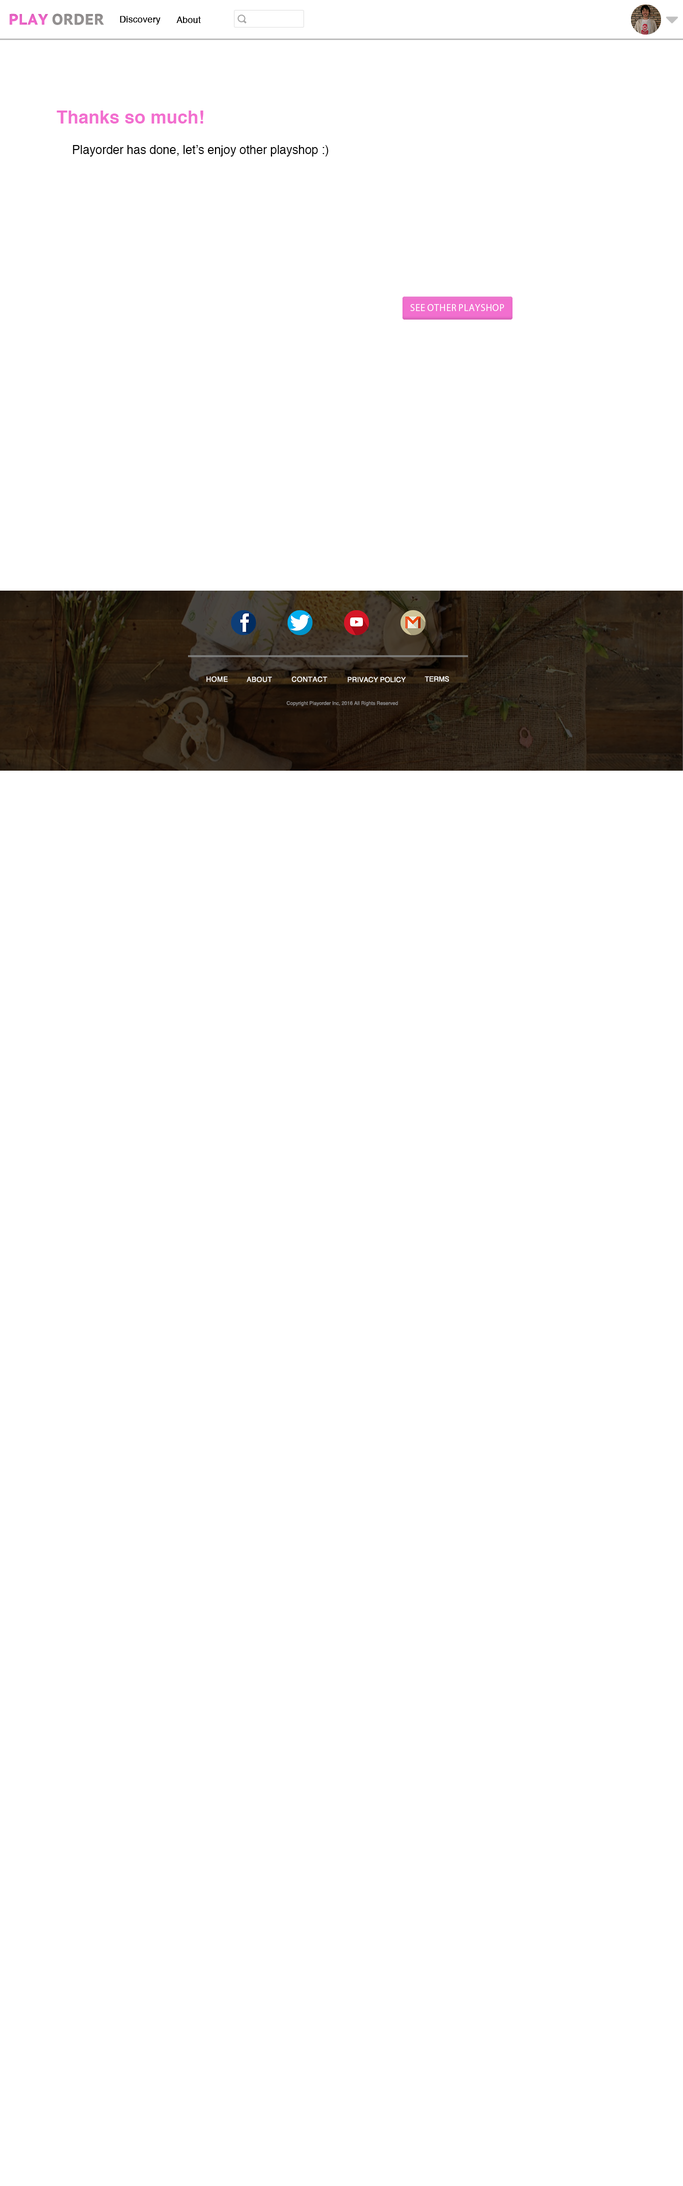
<style>
.page{position:relative;width:683px;height:2186px;background:#ffffff}
.page>*{position:absolute;margin:0}
.t1{font:15px "PTSans-CaptionBold";color:#9d9a9a}
.t2{font:15px "PTSans-CaptionBold";color:#fc6bd5}
.t3{font:9px "Helvetica";color:#000000}
.t4{font:18px "Helvetica-Bold";color:#f26ecf}
.t5{font:12px "Helvetica";color:#000000}
.t6{font:9px "KozGoPr6N-Regular";color:#ffffff}
.t7{font:7px "Helvetica";color:#ffffff}
.t8{font:5px "Helvetica";color:#8f8d8d}
</style>
<div class="page">
<p class="t1" style="left:10px;top:14px;width:94px;height:11px"><span class="t2">PLAY </span>ORDER</p>
<p class="t1" style="left:10px;top:14px;width:94px;height:11px"><span class="t2">PLAY </span>ORDER</p>
<p class="t3" style="left:120px;top:16px;width:40px;height:8px">Discovery</p>
<p class="t3" style="left:120px;top:16px;width:40px;height:8px">Discovery</p>
<p class="t3" style="left:176px;top:16px;width:25px;height:7px">About</p>
<p class="t3" style="left:176px;top:16px;width:25px;height:7px">About</p>
<p class="t4" style="left:56px;top:110px;width:148px;height:14px">Thanks so much!</p>
<p class="t5" style="left:73px;top:145px;width:255px;height:11px">Playorder has done, let’s enjoy other playshop :)</p>
<p class="t6" style="left:410px;top:304px;width:94px;height:7px">SEE OTHER PLAYSHOP</p>
<p class="t7" style="left:206px;top:676px;width:22px;height:6px">HOME</p>
<p class="t7" style="left:246px;top:676px;width:26px;height:6px">ABOUT</p>
<p class="t7" style="left:292px;top:676px;width:36px;height:6px">CONTACT</p>
<p class="t7" style="left:348px;top:676px;width:58px;height:6px">PRIVACY POLICY</p>
<p class="t7" style="left:424px;top:676px;width:25px;height:6px">TERMS</p>
<p class="t8" style="left:286px;top:701px;width:112px;height:5px">Copyright Playorder Inc, 2016 All Rights Reserved</p>
</div>
